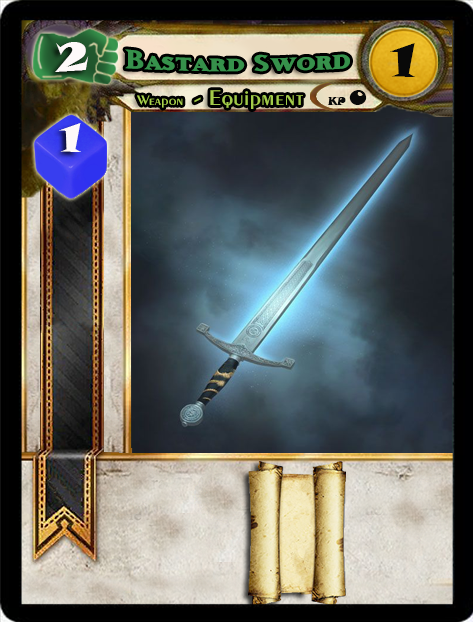
<style>
.page{position:relative;width:473px;height:622px}
.page>*{position:absolute;margin:0}
.t1{font:40px "SnapITC-Regular";color:#fef9f9;scale:1.05 1}
.t2{font:46.6px "SnapITC-Regular";color:#090909;scale:1.05 1}
.t3{font:14.7px "Exotic350BT-DemiBold";color:#abd44e;scale:1.06 1}
.t4{font:22.7px "Exotic350BT-DemiBold";color:#a3cb4a;scale:1.06 1}
.t5{font:10.7px "SnapITC-Regular";color:#090909}
.t6{font:20.5px "SnapITC-Regular";color:#090909}
</style>
<div class="page">
<p class="t1" style="left:55px;top:42px;width:34px;height:30px">2</p>
<p class="t2" style="left:390px;top:43px;width:25px;height:34px">1</p>
<p class="t3" style="left:137px;top:95px;width:46px;height:13px">Weapon</p>
<p class="t4" style="left:194px;top:90px;width:109px;height:19px">- Equipment</p>
<p class="t5" style="left:327px;top:97px;width:19px;height:8px">KP</p>
<p class="t6" style="left:349px;top:90px;width:18px;height:15px">0</p>
<p class="t1" style="left:59px;top:123px;width:22px;height:29px">1</p>
</div>
